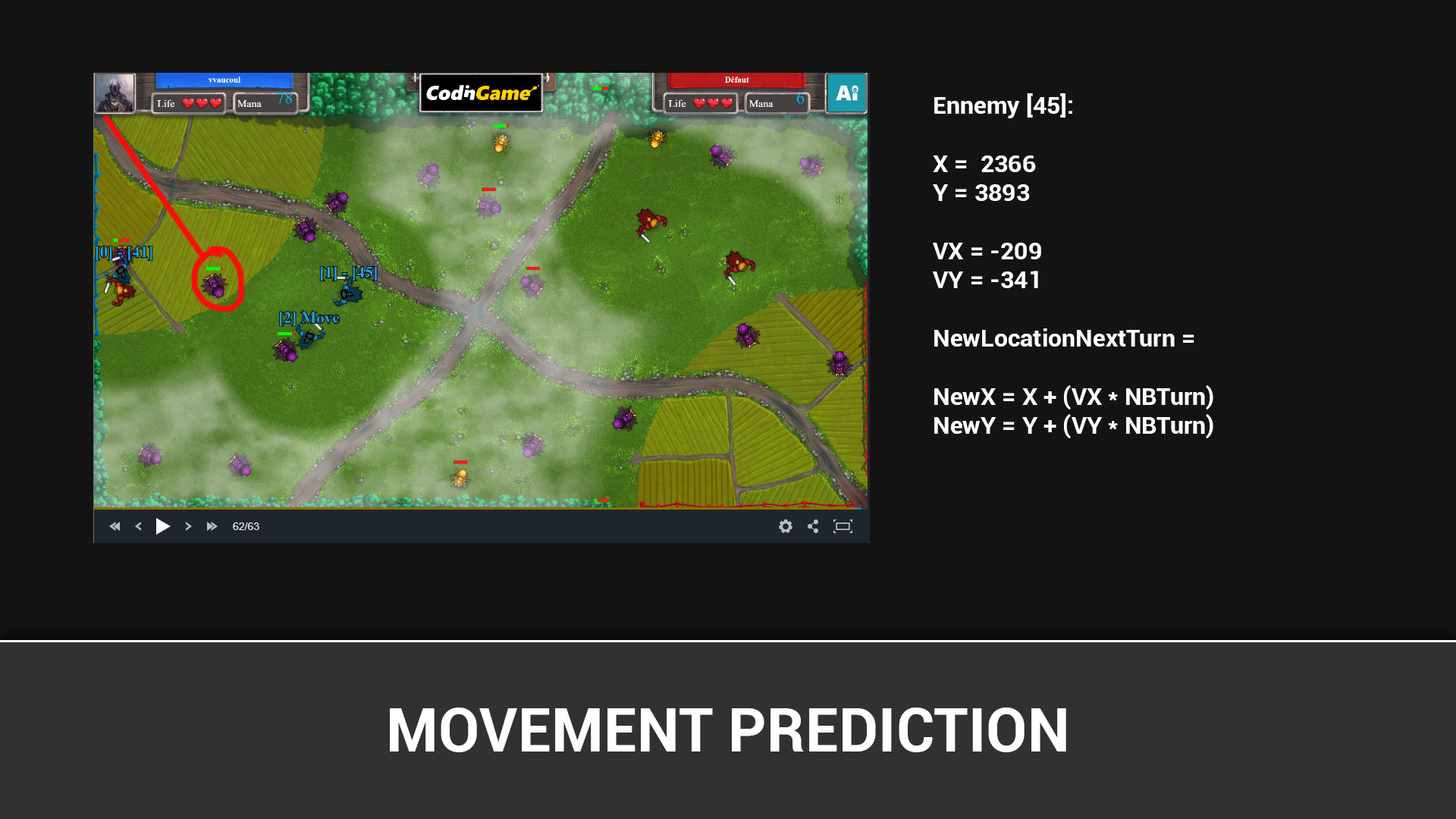
<style>
.page{position:relative;width:1456px;height:819px;background:#131313}
.page>*{position:absolute;margin:0}
.t1{font:24.3px "Roboto-Bold";color:#ffffff}
.t2{font:60.2px "Roboto-Bold";color:#ffffff}
</style>
<div class="page">
<p class="t1" style="left:933px;top:93px;width:280px;height:345px">Ennemy [45]:<br><br>X =  2366<br>Y = 3893<br><br>VX = -209<br>VY = -341<br><br>NewLocationNextTurn = <br><br>NewX = X + (VX * NBTurn)<br>NewY = Y + (VY * NBTurn)</p>
<p class="t2" style="left:390px;top:708px;width:676px;height:44px">MOVEMENT PREDICTION</p>
</div>
